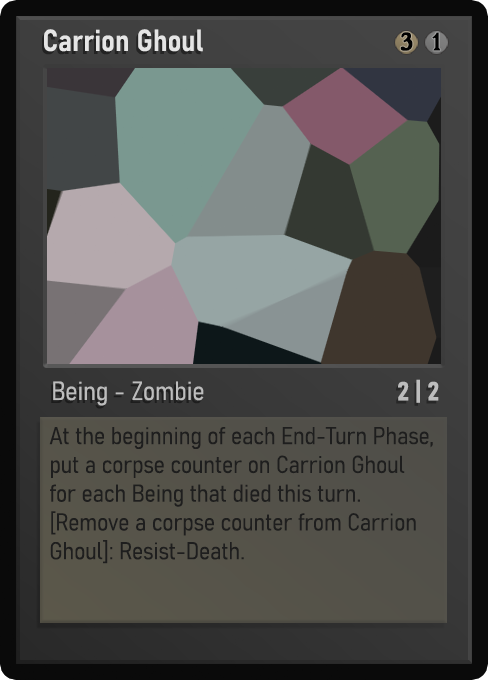
<style>
.page{position:relative;width:488px;height:680px}
.page>*{position:absolute;margin:0}
.t1{font:30px "Bahnschrift-SemiBoldSemiCondensed";color:#f2f2f2;font-weight:bold}
.t2{font:25px "WTRRoycroft";color:#000000;font-weight:bold;scale:1.09 1}
.t3{font:26px "Bahnschrift-LightSemiCondensed";color:#c8c8c8;font-weight:bold}
.t4{font:26px "Bahnschrift-BoldSemiCondensed";color:#bdbdbd;font-weight:bold}
.t5{font:24px "Bahnschrift-LightSemiCondensed";color:#1e1e1e;font-weight:bold}
</style>
<div class="page">
<p class="t1" style="left:44px;top:29px;width:159px;height:23px;opacity:0.9">Carrion Ghoul</p>
<p class="t2" style="left:400px;top:32px;width:13px;height:19px">3</p>
<p class="t2" style="left:432px;top:32px;width:9px;height:19px">1</p>
<p class="t3" style="left:53px;top:381px;width:151px;height:25px;opacity:0.9">Being - Zombie</p>
<p class="t4" style="left:398px;top:379px;width:41px;height:24px">2 | 2</p>
<p class="t5" style="left:49px;top:427px;width:384px;height:137px">At the beginning of each End-Turn Phase, put a corpse counter on Carrion Ghoul for each Being that died this turn. [Remove a corpse counter from Carrion Ghoul]: Resist-Death.</p>
</div>
